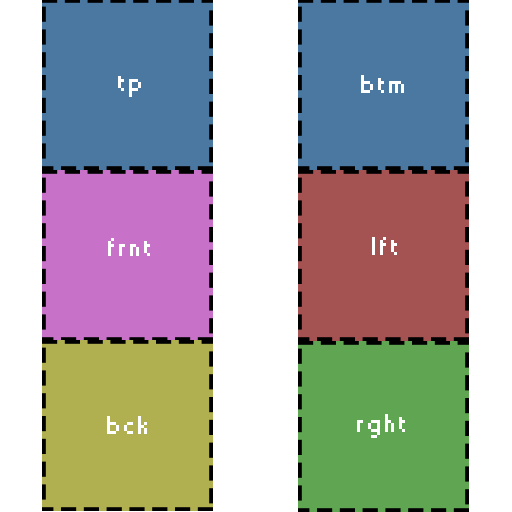
<style>
.page{position:relative;width:512px;height:512px;background:#ffffff}
.page>*{position:absolute;margin:0}
.t1{font:24px "Small Fonts";letter-spacing:0.08em;color:#ffffff}
</style>
<div class="page">
<p class="t1" style="left:118px;top:76px;width:23px;height:21px">tp</p>
<p class="t1" style="left:361px;top:75px;width:43px;height:18px">btm</p>
<p class="t1" style="left:108px;top:238px;width:42px;height:18px">frnt</p>
<p class="t1" style="left:372px;top:237px;width:25px;height:18px">lft</p>
<p class="t1" style="left:357px;top:414px;width:48px;height:24px">rght</p>
<p class="t1" style="left:107px;top:416px;width:40px;height:18px">bck</p>
</div>
